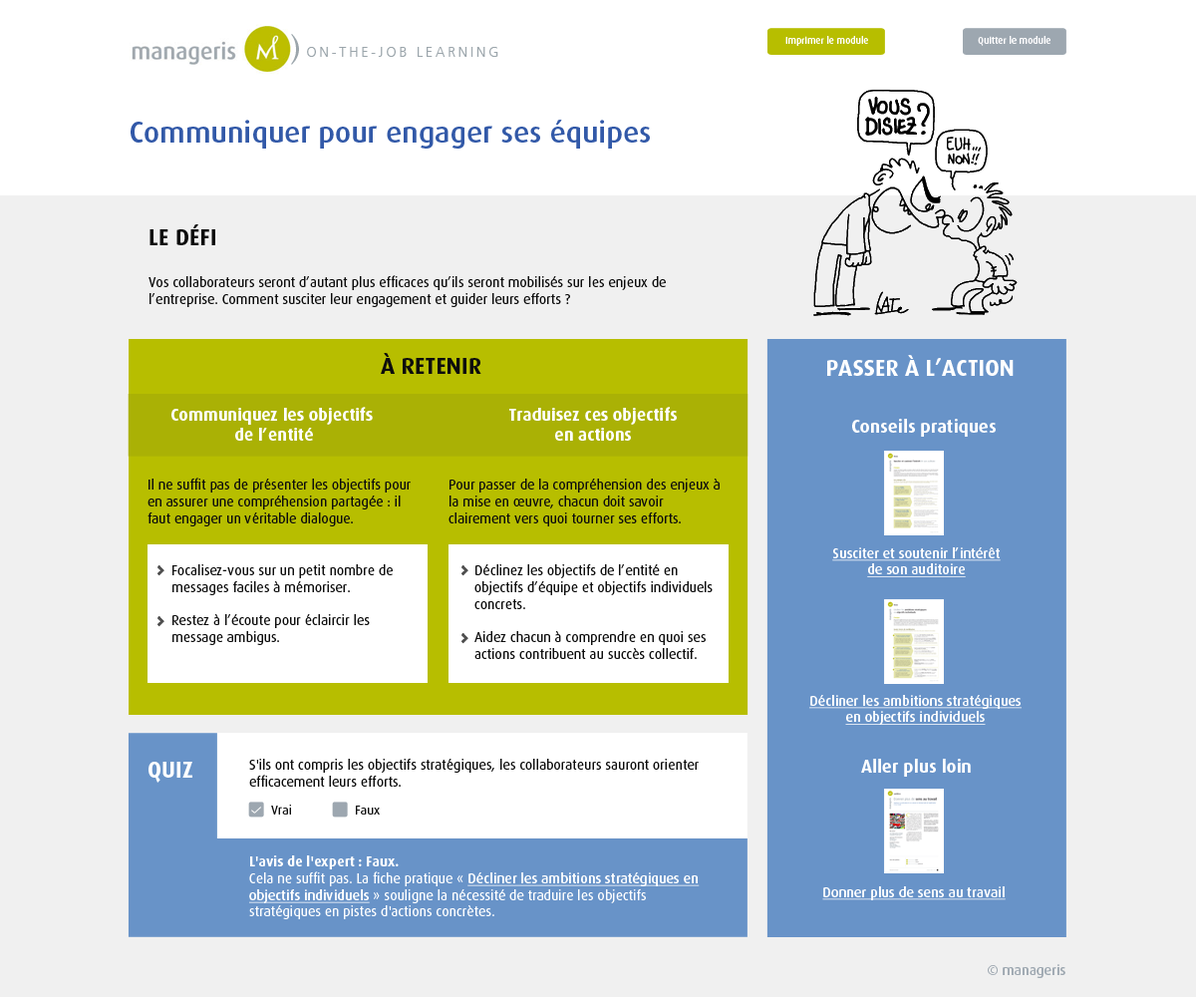
<style>
.page{position:relative;width:1196px;height:997px;background:#f0f0f0}
.page>*{position:absolute;margin:0}
.t1{font:32.5px "Galliard-Bold";color:#9ba5ab;scale:0.9 1}
.t2{font:9.6px "DaxOT-Medium";color:#fffeff}
.t3{font:13.9px "ArticulateLight";letter-spacing:0.21em;color:#9ba5ab}
.t4{font:29.9px "DaxOT-Medium";color:#3259a8}
.t5{font:22.9px "DaxOT-Bold";color:#0d0d0d;text-transform:uppercase}
.t6{font:14px "DaxOT-Regular";color:#0d0d0d}
.t7{font:22.9px "DaxOT-Bold";color:#ffffff;text-transform:uppercase}
.t8{font:16.9px "DaxOT-Bold";color:#ffffff}
.t9{font:17.9px "DaxOT-Bold";color:#ffffff}
.t10{font:14px "DaxOT-Medium";color:#ffffff;text-decoration:underline}
.t11{font:13px "DaxOT-Regular";color:#0d0d0d}
.t12{font:14px "DaxOT-Regular";color:#ffffff}
.t13{font:14px "DaxOT-Bold";color:#ffffff}
.t14{font:14px "DaxOT-Medium";color:#9da7b0}
</style>
<div class="page">
<p class="t1" style="left:291px;top:34px;width:8px;height:31px">)</p>
<p class="t2" style="left:786px;top:36px;width:82px;height:10px">Imprimer le module</p>
<p class="t2" style="left:978px;top:36px;width:73px;height:10px">Quitter le module</p>
<p class="t3" style="left:307px;top:47px;width:191px;height:10px">ON-THE-JOB LEARNING</p>
<p class="t4" style="left:131px;top:120px;width:519px;height:29px">Communiquer pour engager ses équipes</p>
<p class="t5" style="left:150px;top:224px;width:65px;height:21px">Le défi</p>
<p class="t6" style="left:149px;top:275px;width:517px;height:32px">Vos collaborateurs seront d’autant plus efficaces qu’ils seront mobilisés sur les enjeux de l’entreprise. Comment susciter leur engagement et guider leurs efforts ?</p>
<p class="t5" style="left:381px;top:353px;width:100px;height:21px">à retenir</p>
<p class="t7" style="left:827px;top:355px;width:187px;height:21px">PASSER à l’action</p>
<p class="t8" style="left:171px;top:407px;width:202px;height:34px;text-align:center">Communiquez les objectifs <br>de l’entité</p>
<p class="t8" style="left:509px;top:407px;width:168px;height:34px;text-align:center">Traduisez ces objectifs<br>en actions</p>
<p class="t9" style="left:852px;top:419px;width:144px;height:18px">Conseils pratiques</p>
<p class="t6" style="left:148px;top:477px;width:263px;height:49px">Il ne suffit pas de présenter les objectifs pour en assurer une compréhension partagée : il faut engager un véritable dialogue.</p>
<p class="t6" style="left:449px;top:478px;width:271px;height:48px">Pour passer de la compréhension des enjeux à la mise en œuvre, chacun doit savoir clairement vers quoi tourner ses efforts.</p>
<p class="t10" style="left:832px;top:547px;width:169px;height:30px;text-align:center">Susciter et soutenir l’intérêt<br>de son auditoire</p>
<p class="t6" style="left:172px;top:564px;width:221px;height:81px">Focalisez-vous sur un petit nombre de messages faciles à mémoriser.<br><br>Restez à l’écoute pour éclaircir les message ambigus.</p>
<p class="t6" style="left:474px;top:563px;width:239px;height:96px">Déclinez les objectifs de l’entité en objectifs d’équipe et objectifs individuels concrets.<br><br>Aidez chacun à comprendre en quoi ses actions contribuent au succès collectif.</p>
<p class="t10" style="left:809px;top:695px;width:213px;height:30px;text-align:center">Décliner les ambitions stratégiques<br>en objectifs individuels</p>
<p class="t7" style="left:149px;top:762px;width:43px;height:21px">QUIZ</p>
<p class="t6" style="left:249px;top:758px;width:450px;height:29px">S'ils ont compris les objectifs stratégiques, les collaborateurs sauront orienter efficacement leurs efforts.</p>
<p class="t9" style="left:861px;top:759px;width:110px;height:18px">Aller plus loin</p>
<p class="t11" style="left:271px;top:804px;width:20px;height:10px">Vrai</p>
<p class="t11" style="left:356px;top:805px;width:24px;height:9px">Faux</p>
<p class="t12" style="left:249px;top:855px;width:451px;height:64px"><span class="t13">L'avis de l'expert : Faux. <br></span>Cela ne suffit pas. La fiche pratique « <span class="t10">Décliner les ambitions stratégiques en objectifs individuels</span> » souligne la nécessité de traduire les objectifs stratégiques en pistes d'actions concrètes.</p>
<p class="t10" style="left:822px;top:886px;width:184px;height:14px">Donner plus de sens au travail</p>
<p class="t14" style="left:988px;top:964px;width:78px;height:14px">© manageris</p>
</div>
